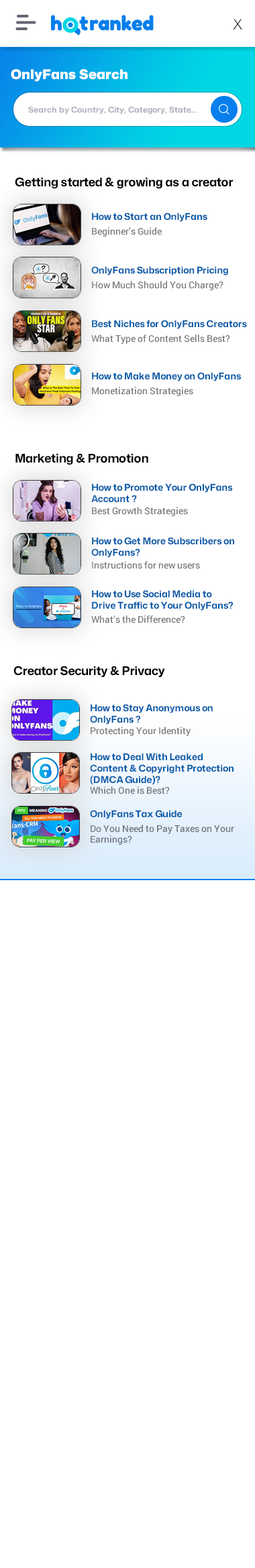
<style>
.page{position:relative;width:255px;height:1568px;background:#ffffff}
.page>*{position:absolute;margin:0}
.t1{font:14.1px "MonaSans-Light";letter-spacing:-0.01em;color:#000000}
.t2{font:13.4px "MonaSans-Black";color:#ffffff}
.t3{font:8px "MonaSans-Bold";color:#adb2bd}
.t4{font:12.1px "MonaSans-Bold";letter-spacing:-0.01em;color:#000000}
.t5{font:9.4px "MonaSans-Bold";letter-spacing:-0.01em;color:#065baa}
.t6{font:9.4px "Roboto-Medium";color:#7d7d7d}
.t7{font:9.4px "MonaSans-Bold";letter-spacing:-0.01em;color:#065caa}
.t8{font:9.4px/11.3px "MonaSans-Bold";letter-spacing:-0.01em;color:#065baa}
.t9{font:9.4px "Roboto-Medium";color:#7b7c7d}
.t10{font:9.4px "Roboto-Medium";color:#76797c}
.t11{font:9.4px/10.8px "Roboto-Medium";color:#72777c}
</style>
<div class="page">
<p class="t1" style="left:233px;top:19px;width:9px;height:10px">X</p>
<p class="t2" style="left:11px;top:69px;width:116px;height:13px">OnlyFans Search</p>
<p class="t3" style="left:28px;top:107px;width:169px;height:8px">Search by Country, City, Category, State...</p>
<p class="t4" style="left:15px;top:177px;width:218px;height:12px">Getting started &amp; growing as a creator</p>
<p class="t5" style="left:92px;top:213px;width:115px;height:9px">How to Start an OnlyFans</p>
<p class="t6" style="left:92px;top:227px;width:70px;height:10px">Beginner’s Guide</p>
<p class="t5" style="left:91px;top:266px;width:137px;height:10px">OnlyFans Subscription Pricing</p>
<p class="t6" style="left:92px;top:281px;width:131px;height:9px">How Much Should You Charge?</p>
<p class="t5" style="left:92px;top:320px;width:155px;height:9px">Best Niches for OnlyFans Creators</p>
<p class="t6" style="left:91px;top:335px;width:139px;height:9px">What Type of Content Sells Best?</p>
<p class="t7" style="left:92px;top:372px;width:149px;height:9px">How to Make Money on OnlyFans</p>
<p class="t6" style="left:92px;top:387px;width:101px;height:9px">Monetization Strategies</p>
<p class="t4" style="left:15px;top:453px;width:133px;height:12px">Marketing &amp; Promotion</p>
<p class="t8" style="left:91px;top:483px;width:142px;height:20px">How to Promote Your OnlyFans Account ?</p>
<p class="t6" style="left:92px;top:507px;width:96px;height:9px">Best Growth Strategies</p>
<p class="t8" style="left:91px;top:537px;width:143px;height:21px">How to Get More Subscribers on OnlyFans?</p>
<p class="t6" style="left:92px;top:561px;width:108px;height:8px">Instructions for new users</p>
<p class="t8" style="left:92px;top:590px;width:141px;height:21px">How to Use Social Media to Drive Traffic to Your OnlyFans?</p>
<p class="t6" style="left:91px;top:615px;width:94px;height:8px">What’s the Difference?</p>
<p class="t4" style="left:13px;top:666px;width:152px;height:11px">Creator Security &amp; Privacy</p>
<p class="t8" style="left:90px;top:704px;width:123px;height:21px">How to Stay Anonymous on OnlyFans ?</p>
<p class="t9" style="left:91px;top:727px;width:99px;height:9px">Protecting Your Identity</p>
<p class="t8" style="left:90px;top:753px;width:143px;height:32px">How to Deal With Leaked Content &amp; Copyright Protection (DMCA Guide)?</p>
<p class="t10" style="left:90px;top:786px;width:80px;height:8px">Which One is Best?</p>
<p class="t5" style="left:90px;top:810px;width:92px;height:9px">OnlyFans Tax Guide</p>
<p class="t11" style="left:91px;top:825px;width:143px;height:20px">Do You Need to Pay Taxes on Your Earnings?</p>
</div>
